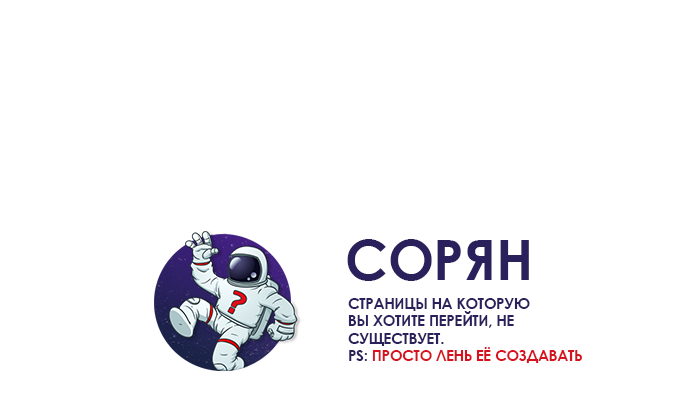
<style>
.page{position:relative;width:700px;height:400px;background:#ffffff}
.page>*{position:absolute;margin:0}
.t1{font:54.8px "CenturyGothic-Bold";color:#2a205c}
.t2{font:14.6px "CenturyGothic-Bold";color:#2a205c}
.t3{font:14.6px "CenturyGothic-Bold";color:#d6121e}
</style>
<div class="page">
<p class="t1" style="left:347px;top:239px;width:182px;height:42px">СОРЯН</p>
<p class="t2" style="left:348px;top:298px;width:234px;height:65px">СТРАНИЦЫ НА КОТОРУЮ<br>ВЫ ХОТИТЕ ПЕРЕЙТИ, НЕ<br>СУЩЕСТВУЕТ.<br>PS: <span class="t3">ПРОСТО ЛЕНЬ ЕЁ СОЗДАВАТЬ</span></p>
</div>
